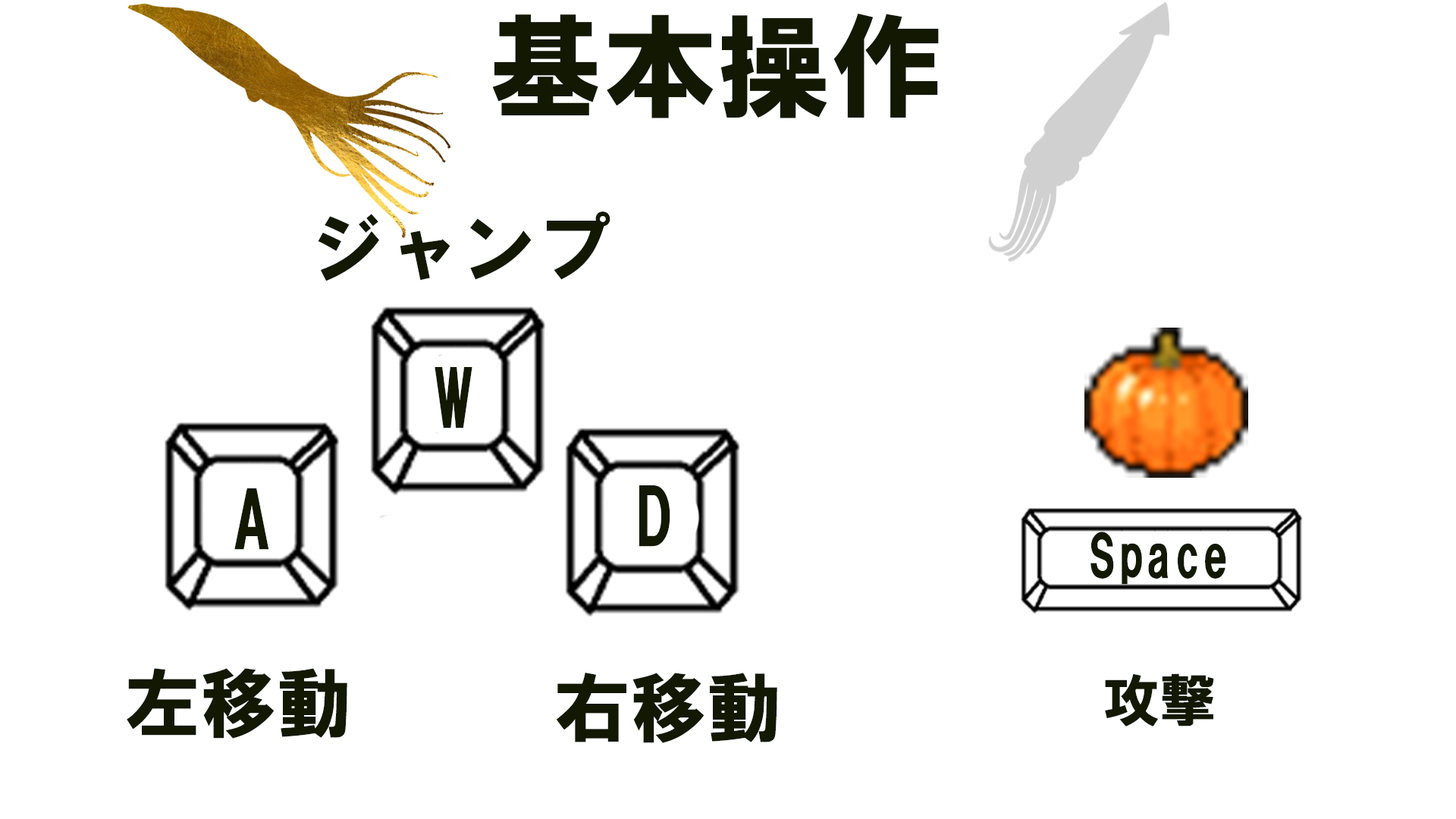
<style>
.page{position:relative;width:1456px;height:819px;background:#ffffff}
.page>*{position:absolute;margin:0}
.t1{font:113.7px "HGSoeiKakugothicUB";color:#131803}
.t2{font:75.8px "HGSoeiKakugothicUB";color:#131803}
.t3{font:56.9px "HGSoeiKakugothicUB";color:#131803}
</style>
<div class="page">
<p class="t1" style="left:492px;top:13px;width:447px;height:105px">基本操作</p>
<p class="t2" style="left:318px;top:212px;width:292px;height:69px">ジャンプ</p>
<p class="t2" style="left:435px;top:367px;width:37px;height:61px">W</p>
<p class="t2" style="left:639px;top:485px;width:31px;height:62px">D</p>
<p class="t2" style="left:234px;top:488px;width:35px;height:62px">A</p>
<p class="t3" style="left:1090px;top:532px;width:136px;height:53px">Space</p>
<p class="t2" style="left:127px;top:668px;width:220px;height:71px">左移動</p>
<p class="t2" style="left:556px;top:673px;width:221px;height:70px">右移動</p>
<p class="t3" style="left:1105px;top:673px;width:109px;height:53px">攻撃</p>
</div>
